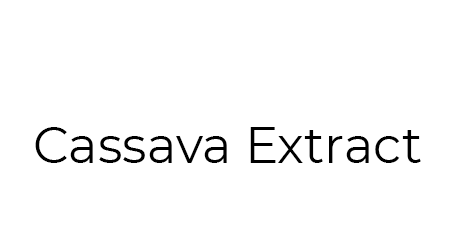
<style>
.page{position:relative;width:455px;height:238px;background:#ffffff}
.page>*{position:absolute;margin:0}
.t1{font:50px "Montserrat-Regular";color:#000000}
</style>
<div class="page">
<p class="t1" style="left:35px;top:127px;width:386px;height:36px">Cassava Extract</p>
</div>
